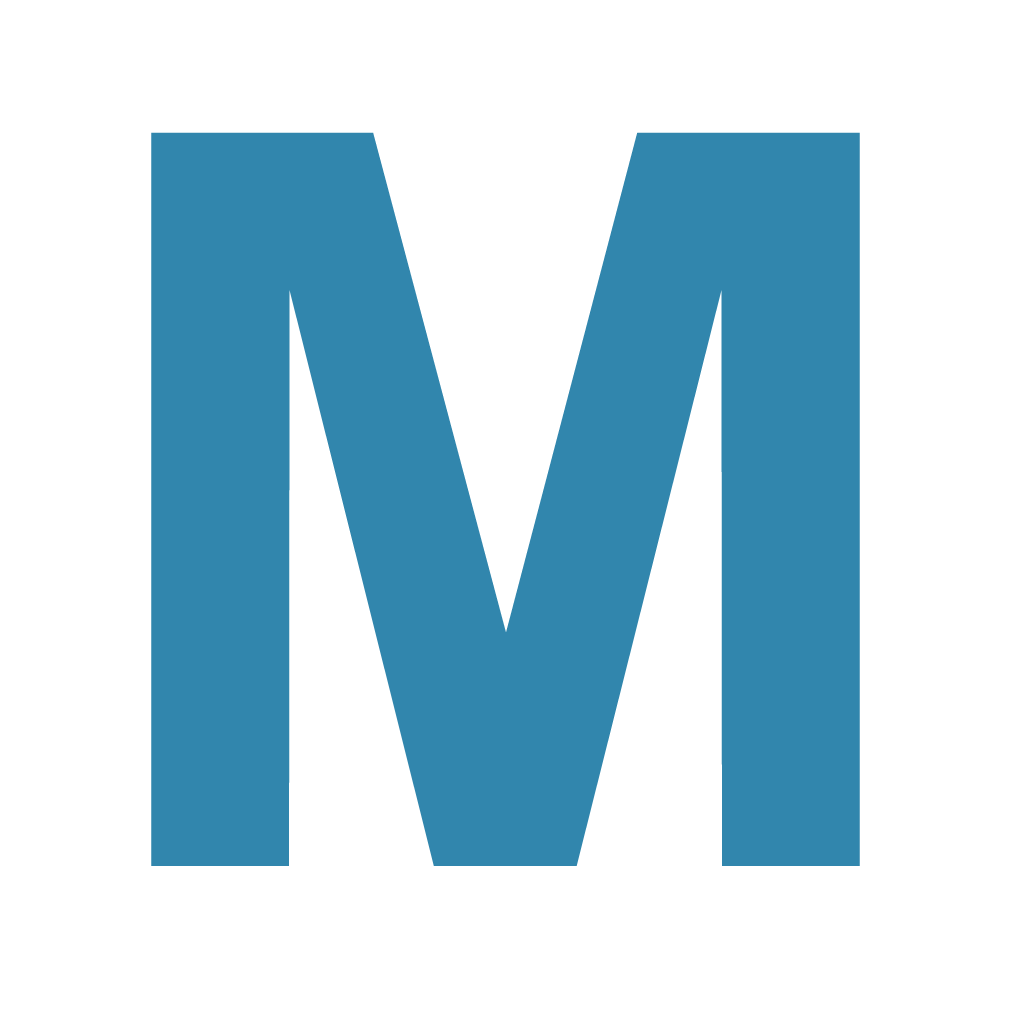
<style>
.page{position:relative;width:1024px;height:1024px;background:#ffffff}
.page>*{position:absolute;margin:0}
.t1{font:1024px "Arial-BoldMT";color:#3186ad}
</style>
<div class="page">
<p class="t1" style="left:151px;top:132px;width:709px;height:734px">M</p>
</div>
